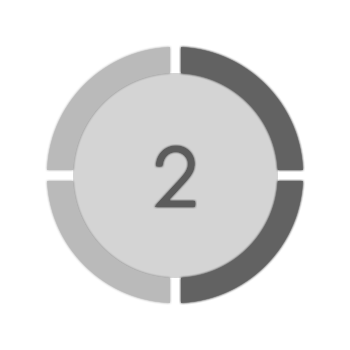
<style>
.page{position:relative;width:350px;height:350px;background:#ffffff}
.page>*{position:absolute;margin:0}
.t1{font:82.4px "CenturyGothic";color:#5c5c5c}
</style>
<div class="page">
<p class="t1" style="left:154px;top:146px;width:41px;height:61px">2</p>
</div>
